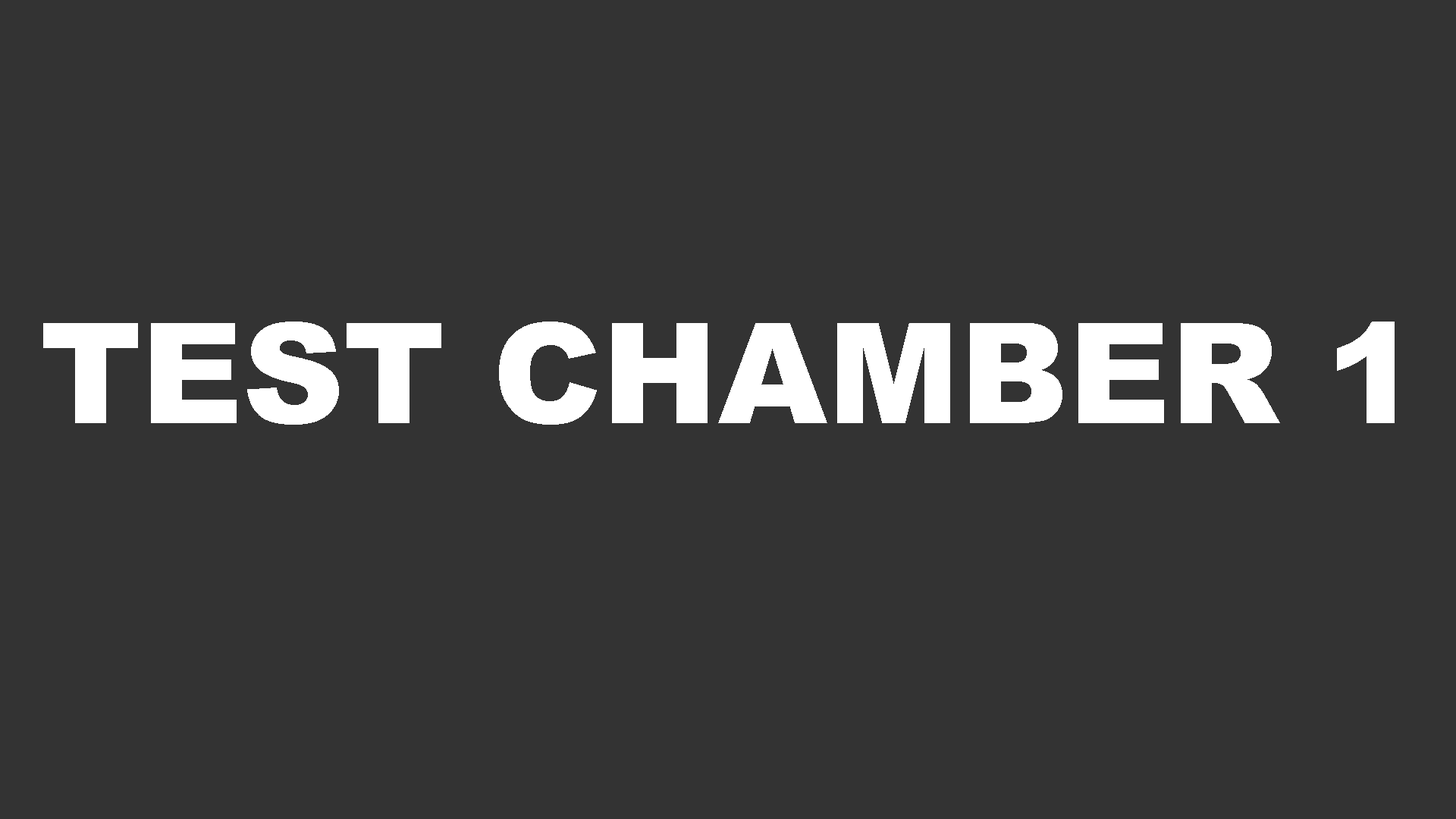
<style>
.page{position:relative;width:1456px;height:819px;background:#333333}
.page>*{position:absolute;margin:0}
.t1{font:140.3px "Arial-Black";color:#ffffff}
</style>
<div class="page">
<p class="t1" style="left:43px;top:322px;width:1352px;height:103px">TEST CHAMBER 1</p>
</div>
